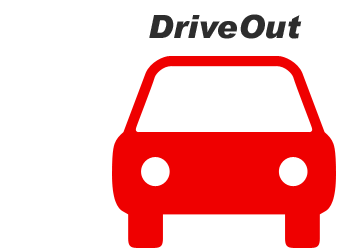
<style>
.page{position:relative;width:350px;height:250px;background:#ffffff}
.page>*{position:absolute;margin:0}
.t1{font:32px "Arial-BlackItalic";color:#2d2d2d}
</style>
<div class="page">
<p class="t1" style="left:149px;top:14px;width:153px;height:25px">DriveOut</p>
</div>
